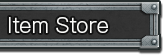
<style>
.page{position:relative;width:163px;height:55px}
.page>*{position:absolute;margin:0}
.t1{font:20px "GothicMB101Pro-Light";color:#fbfbf9}
</style>
<div class="page">
<p class="t1" style="left:9px;top:17px;width:99px;height:16px">Item Store</p>
</div>
